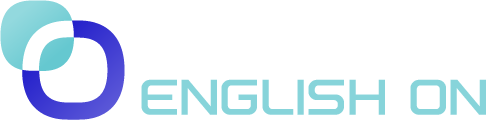
<style>
.page{position:relative;width:487px;height:120px;background:#ffffff}
.page>*{position:absolute;margin:0}
.t1{font:50px "DirectiveFour";color:#87d4da;text-transform:uppercase;font-weight:bold}
</style>
<div class="page">
<p class="t1" style="left:141px;top:79px;width:345px;height:36px">English On</p>
</div>
